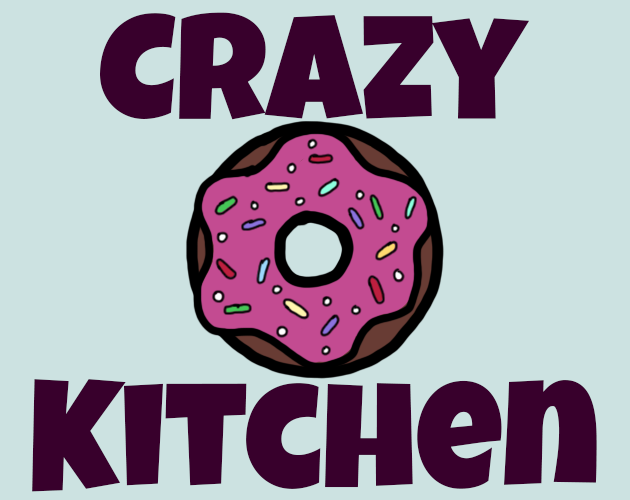
<style>
.page{position:relative;width:630px;height:500px;background:#cce2e1}
.page>*{position:absolute;margin:0}
.t1{font:150px "LuckiestGuy-Regular";color:#38002c}
</style>
<div class="page">
<p class="t1" style="left:100px;top:12px;width:430px;height:108px">Crazy</p>
<p class="t1" style="left:32px;top:379px;width:565px;height:113px">Kitchen</p>
</div>
